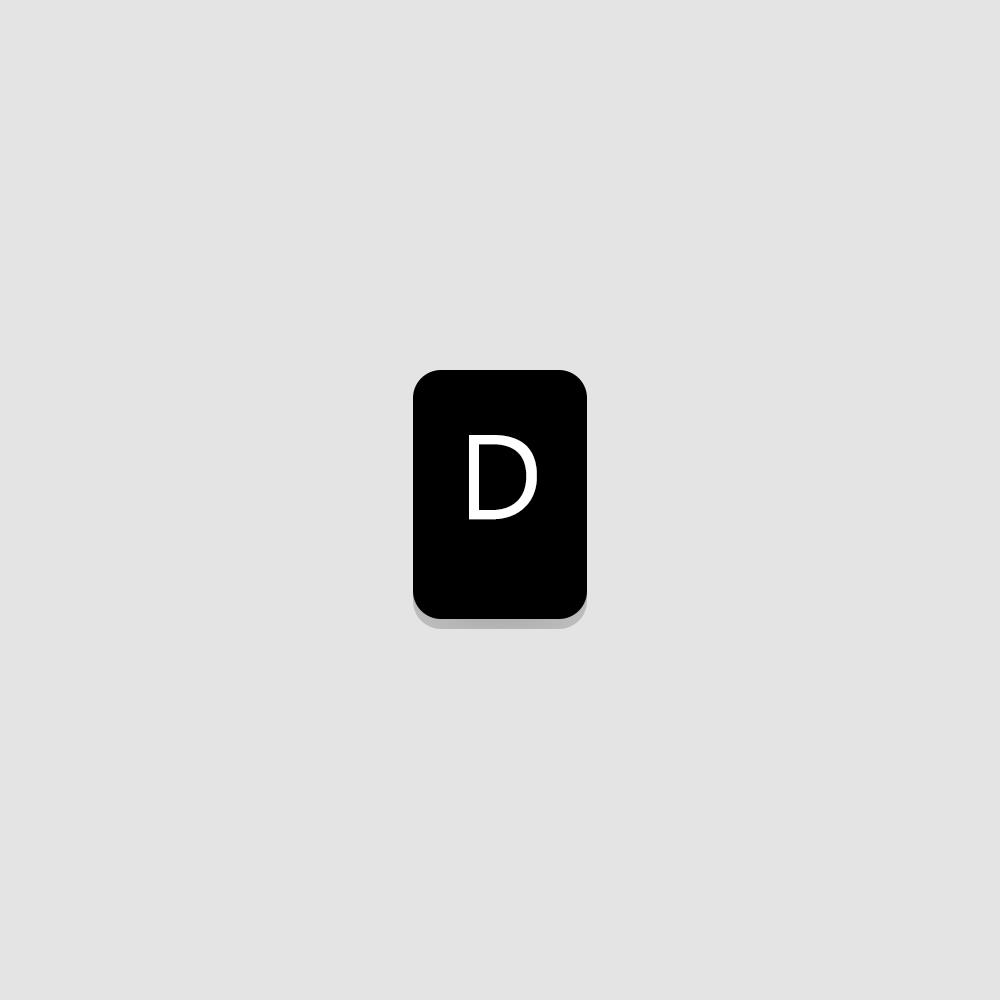
<style>
.page{position:relative;width:1000px;height:1000px;background:#e4e4e4}
.page>*{position:absolute;margin:0}
.t1{font:120px "MicrosoftPhagsPa";color:#ffffff}
</style>
<div class="page">
<p class="t1" style="left:469px;top:435px;width:68px;height:85px">D</p>
</div>
